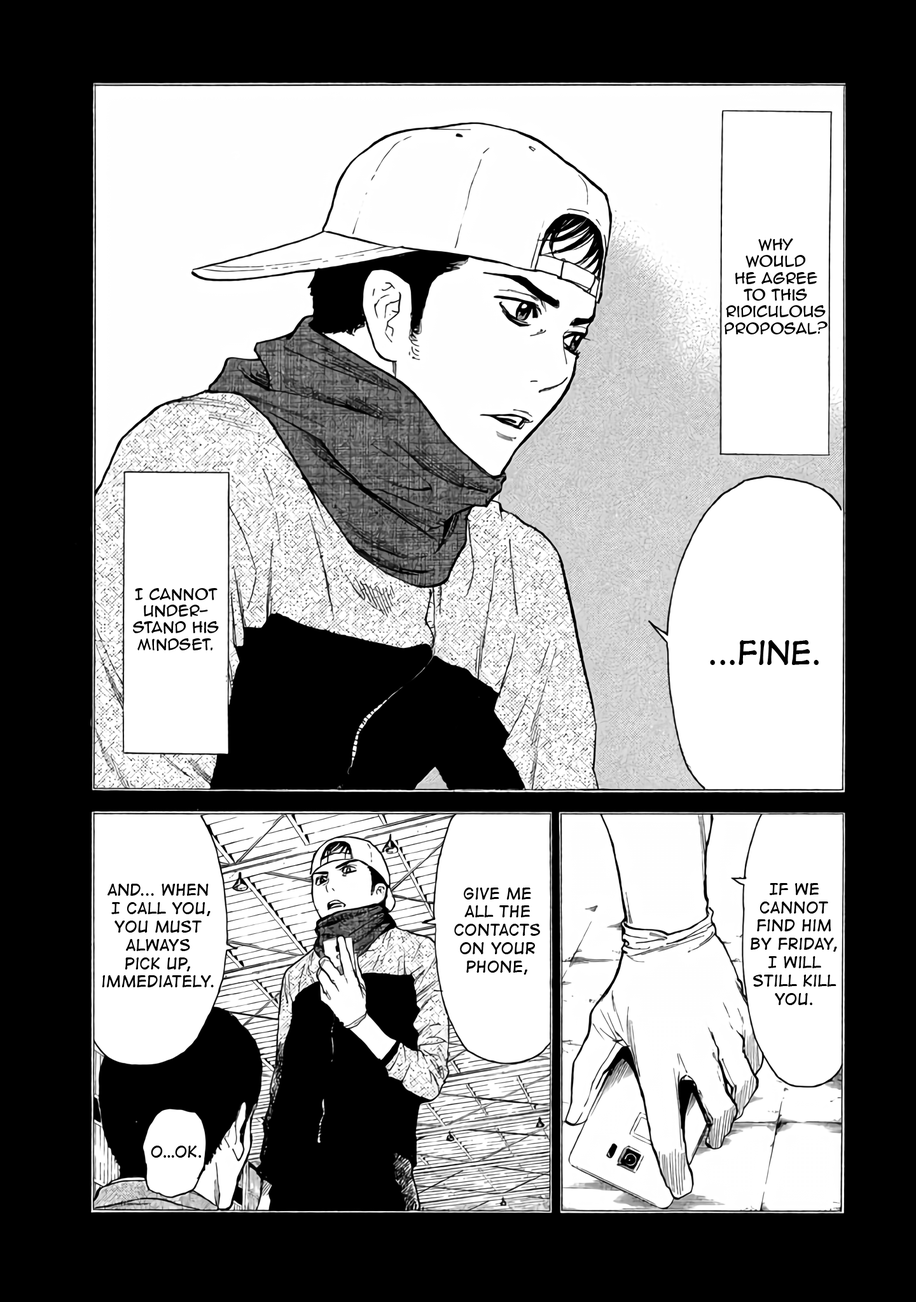
<style>
.page{position:relative;width:916px;height:1302px;background:#000000}
.page>*{position:absolute;margin:0}
.t1{font:14px "AnimeAce2.0BB";color:#000000}
.t2{font:30.5px "DigitalStrip";color:#000000}
.t3{font:15.3px "DigitalStrip";color:#000000}
</style>
<div class="page">
<p class="t1" style="left:724px;top:238px;width:103px;height:96px;text-align:center">Why <br>would he agree to this ridiculous proposal?</p>
<p class="t1" style="left:133px;top:588px;width:86px;height:63px;text-align:center">I cannot under-<br>stand his mindset.</p>
<p class="t2" style="left:710px;top:640px;width:108px;height:25px">...Fine.</p>
<p class="t3" style="left:102px;top:884px;width:112px;height:104px;text-align:center">and... when<br> I call you, You must always pick up, immediately.</p>
<p class="t3" style="left:454px;top:888px;width:86px;height:87px;text-align:center">Give me all the contacts on your phone,</p>
<p class="t3" style="left:750px;top:883px;width:87px;height:122px;text-align:center">If we cannot find him by Friday, I will still kill  you.</p>
<p class="t3" style="left:151px;top:1146px;width:50px;height:12px">o…Ok.</p>
</div>
